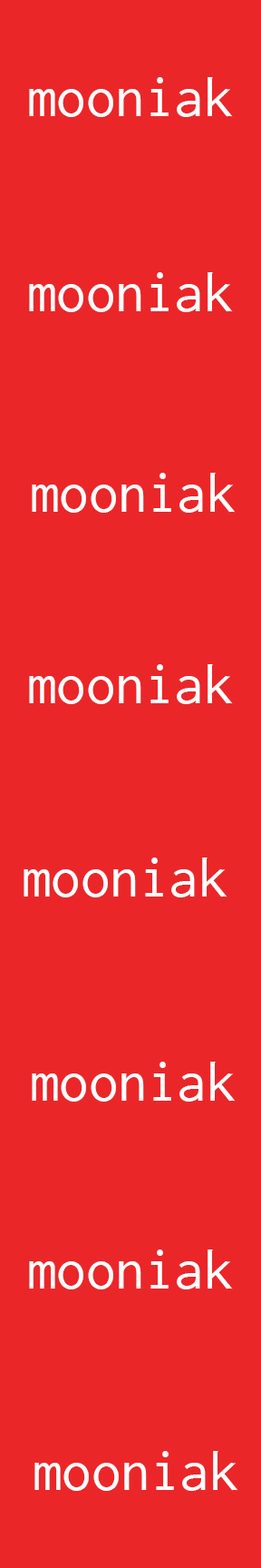
<style>
.page{position:relative;width:261px;height:1568px;background:#eb2629}
.page>*{position:absolute;margin:0}
.t1{font:58.5px "Inconsolata-Regular";color:#ffffff}
</style>
<div class="page">
<p class="t1" style="left:29px;top:77px;width:204px;height:40px">mooniak</p>
<p class="t1" style="left:29px;top:272px;width:204px;height:40px">mooniak</p>
<p class="t1" style="left:32px;top:473px;width:204px;height:40px">mooniak</p>
<p class="t1" style="left:29px;top:664px;width:204px;height:40px">mooniak</p>
<p class="t1" style="left:24px;top:858px;width:204px;height:39px">mooniak</p>
<p class="t1" style="left:32px;top:1062px;width:204px;height:40px">mooniak</p>
<p class="t1" style="left:29px;top:1250px;width:204px;height:39px">mooniak</p>
<p class="t1" style="left:34px;top:1451px;width:205px;height:40px">mooniak</p>
</div>
